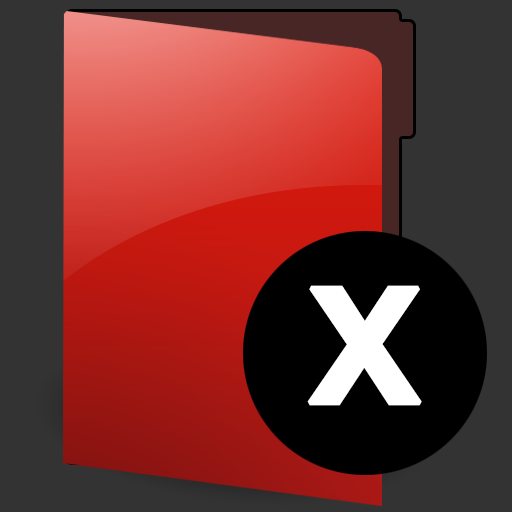
<style>
.page{position:relative;width:512px;height:512px;background:#333333}
.page>*{position:absolute;margin:0}
.t1{font:164px "Gotham-Bold";letter-spacing:-0.02em;color:#ffffff;font-weight:bold}
</style>
<div class="page">
<p class="t1" style="left:307px;top:285px;width:115px;height:121px">X</p>
</div>
